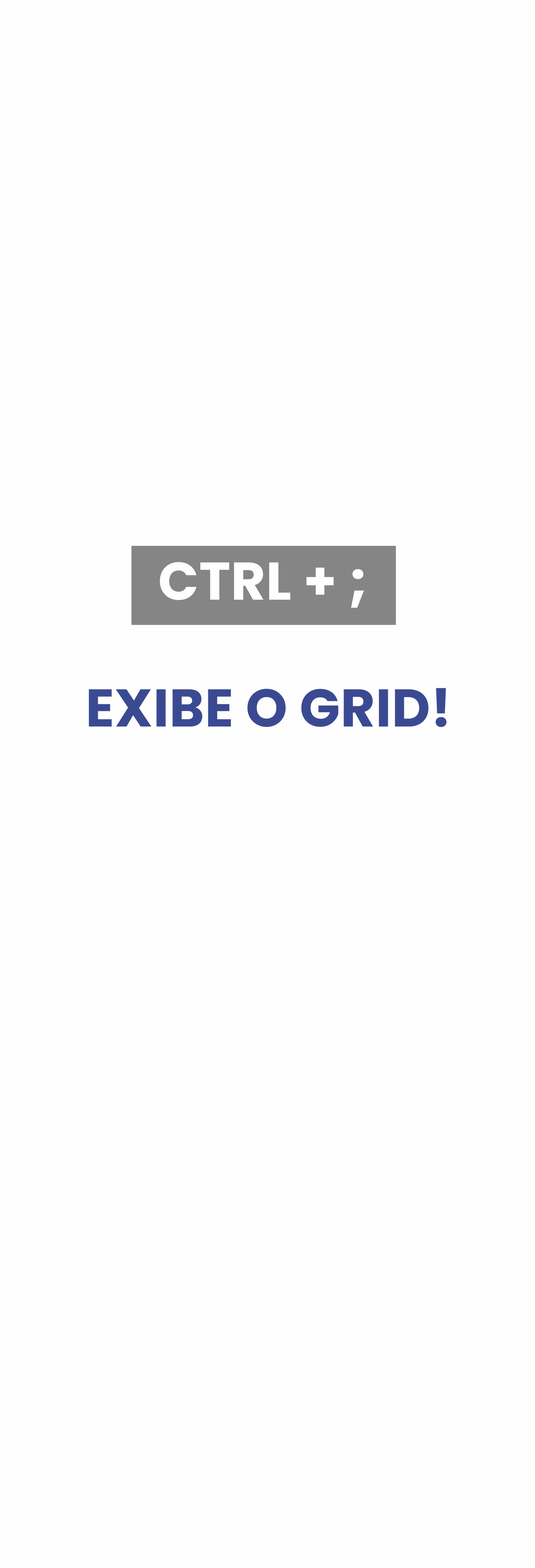
<style>
.page{position:relative;width:535px;height:1568px;background:#fefefe}
.page>*{position:absolute;margin:0}
.t1{font:52.9px "Poppins-Bold";letter-spacing:0.01em;color:#3a4a92}
.t2{font:52.9px "Poppins-Bold";letter-spacing:0.01em;color:#fefefe}
</style>
<div class="page">
<p class="t1" style="left:89px;top:562px;width:358px;height:165px;text-align:center"><span class="t2">CTRL + ; <br></span><br>EXIBE O GRID!</p>
</div>
